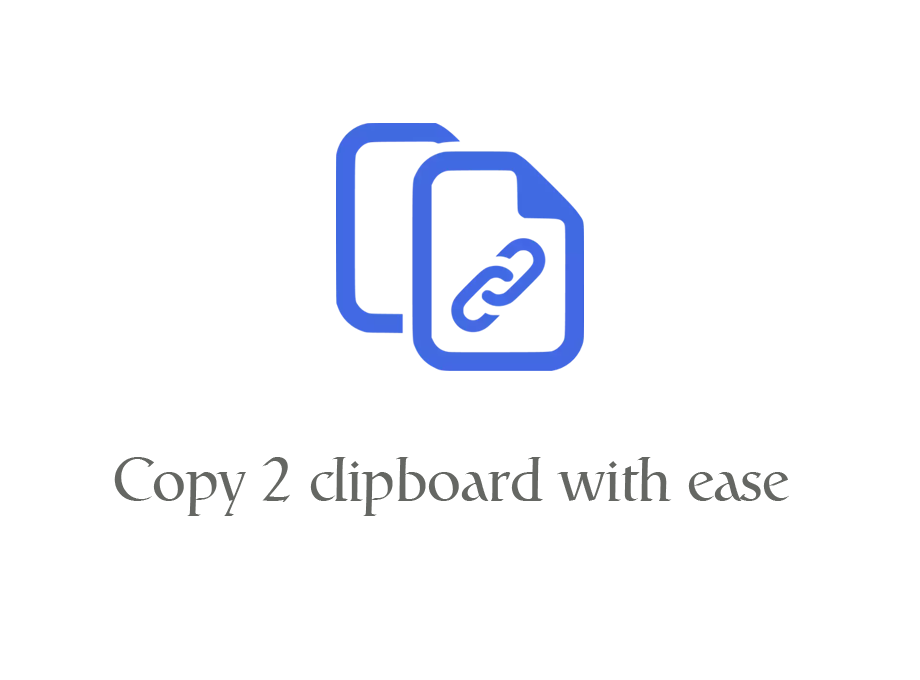
<style>
.page{position:relative;width:920px;height:680px;background:#ffffff}
.page>*{position:absolute;margin:0}
.t1{font:60px "Catull";color:#656763}
</style>
<div class="page">
<p class="t1" style="left:114px;top:457px;width:675px;height:59px">Copy 2 clipboard with ease</p>
</div>
